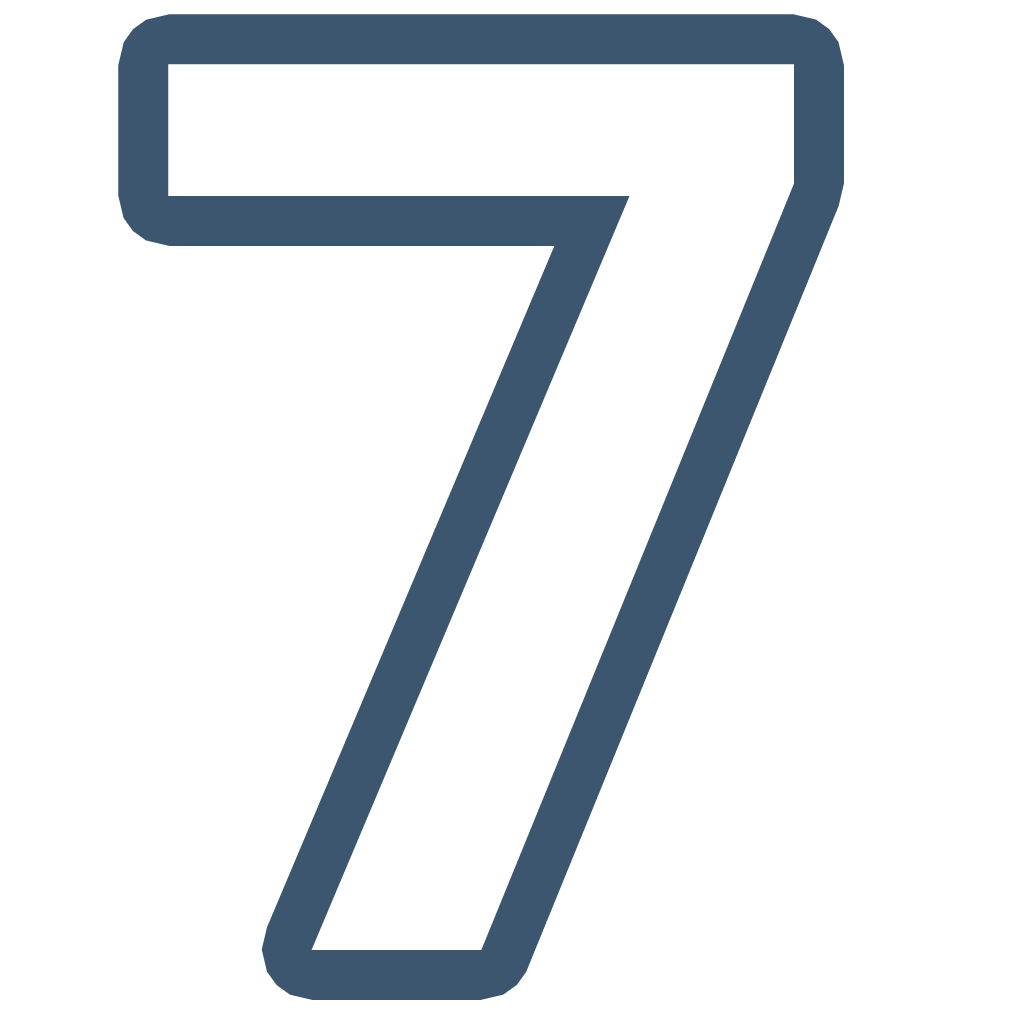
<style>
.page{position:relative;width:1015px;height:1015px;background:#ffffff}
.page>*{position:absolute;margin:0}
.t1{font:1265px "GolosText-Medium";color:#ffffff;scale:1.03 1}
</style>
<div class="page">
<p class="t1" style="left:168px;top:64px;width:626px;height:886px">7</p>
</div>
